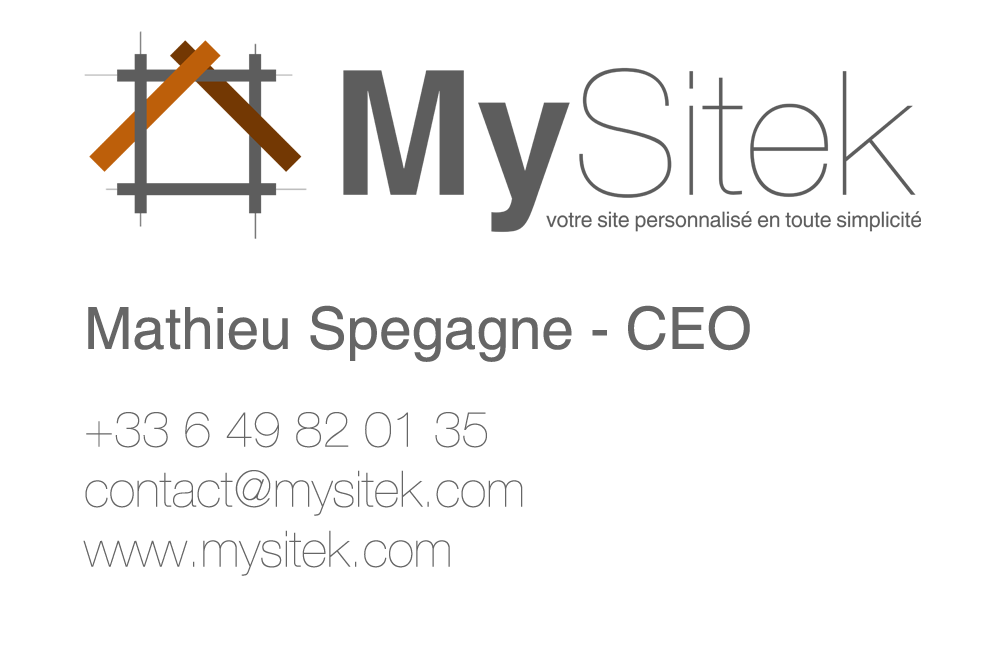
<style>
.page{position:relative;width:1004px;height:650px;background:#ffffff}
.page>*{position:absolute;margin:0}
.t1{font:58.3px "Helvetica";color:#666666}
.t2{font:50px "HelvNueUltLight";color:#666666}
</style>
<div class="page">
<p class="t1" style="left:88px;top:305px;width:662px;height:57px">Mathieu Spegagne - CEO</p>
<p class="t2" style="left:83px;top:412px;width:440px;height:164px">+33 6 49 82 01 35<br>contact@mysitek.com<br>www.mysitek.com</p>
</div>
